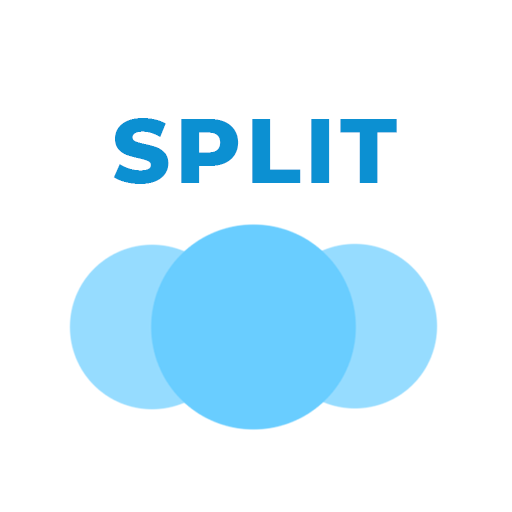
<style>
.page{position:relative;width:512px;height:512px;background:#ffffff}
.page>*{position:absolute;margin:0}
.t1{font:90px "Montserrat-ExtraBold";letter-spacing:0.05em;color:#0c90d2}
</style>
<div class="page">
<p class="t1" style="left:113px;top:118px;width:284px;height:66px">SPLIT</p>
</div>
